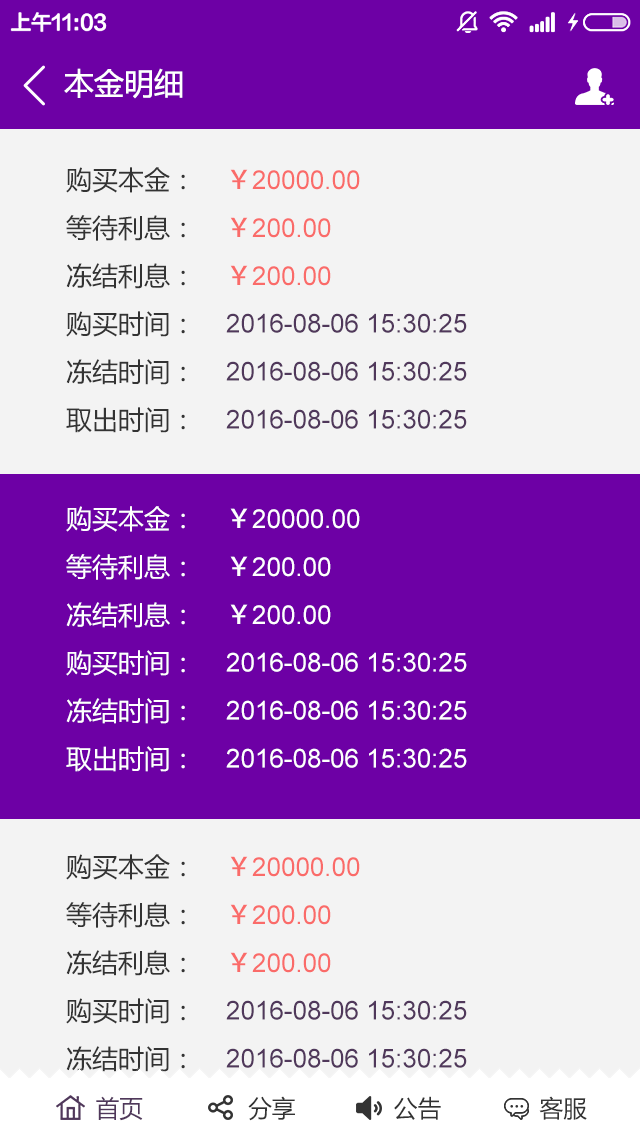
<style>
.page{position:relative;width:640px;height:1136px;background:#f3f3f3}
.page>*{position:absolute;margin:0}
.t1{font:30px "MicrosoftYaHei";color:#ffffff}
.t2{font:26px/48px "MicrosoftYaHei";color:#333333}
.t3{font:26px/48px "ArialMT";color:#50385b}
.t4{font:26px/48px "AdobeHeitiStd-Regular";color:#fa6b69}
.t5{font:26px/48px "ArialMT";color:#fa6b69}
.t6{font:26px/48px "MicrosoftYaHei";color:#ffffff}
.t7{font:26px/48px "ArialMT";color:#ffffff}
.t8{font:26px/48px "AdobeHeitiStd-Regular";color:#ffffff}
.t9{font:24px "MicrosoftYaHei";color:#333333}
.t10{font:24px "MicrosoftYaHei";color:#50385b}
</style>
<div class="page">
<p class="t1" style="left:64px;top:68px;width:119px;height:31px">本金明细</p>
<p class="t2" style="left:66px;top:167px;width:119px;height:266px">购买本金：<br>等待利息：<br>冻结利息：<br>购买时间：<br>冻结时间：<br>取出时间：</p>
<p class="t3" style="left:226px;top:169px;width:241px;height:260px"><span class="t4">￥</span><span class="t5">20000.00<br></span><span class="t4">￥</span><span class="t5">200.00<br></span><span class="t4">￥</span><span class="t5">200.00<br></span>2016-08-06 15:30:25<br>2016-08-06 15:30:25<br>2016-08-06 15:30:25</p>
<p class="t6" style="left:66px;top:506px;width:119px;height:266px">购买本金：<br>等待利息：<br>冻结利息：<br>购买时间：<br>冻结时间：<br>取出时间：</p>
<p class="t7" style="left:226px;top:508px;width:241px;height:260px"><span class="t8">￥</span>20000.00<br><span class="t8">￥</span>200.00<br><span class="t8">￥</span>200.00<br>2016-08-06 15:30:25<br>2016-08-06 15:30:25<br>2016-08-06 15:30:25</p>
<p class="t2" style="left:66px;top:854px;width:119px;height:266px">购买本金：<br>等待利息：<br>冻结利息：<br>购买时间：<br>冻结时间：<br>取出时间：</p>
<p class="t3" style="left:226px;top:856px;width:241px;height:260px"><span class="t4">￥</span><span class="t5">20000.00<br></span><span class="t4">￥</span><span class="t5">200.00<br></span><span class="t4">￥</span><span class="t5">200.00<br></span>2016-08-06 15:30:25<br>2016-08-06 15:30:25<br>2016-08-06 15:30:25</p>
<p class="t9" style="left:96px;top:1096px;width:491px;height:25px"><span class="t10">首页</span>               分享              公告              客服</p>
</div>
